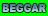
<style>
.page{position:relative;width:48px;height:16px;background:#00ff00}
.page>*{position:absolute;margin:0}
.t1{font:11.4px "Arial-Black";scale:0.81 1}
</style>
<div class="page">
<p class="t1" style="left:2px;top:4px;width:44px;height:8px">BEGGAR</p>
</div>
